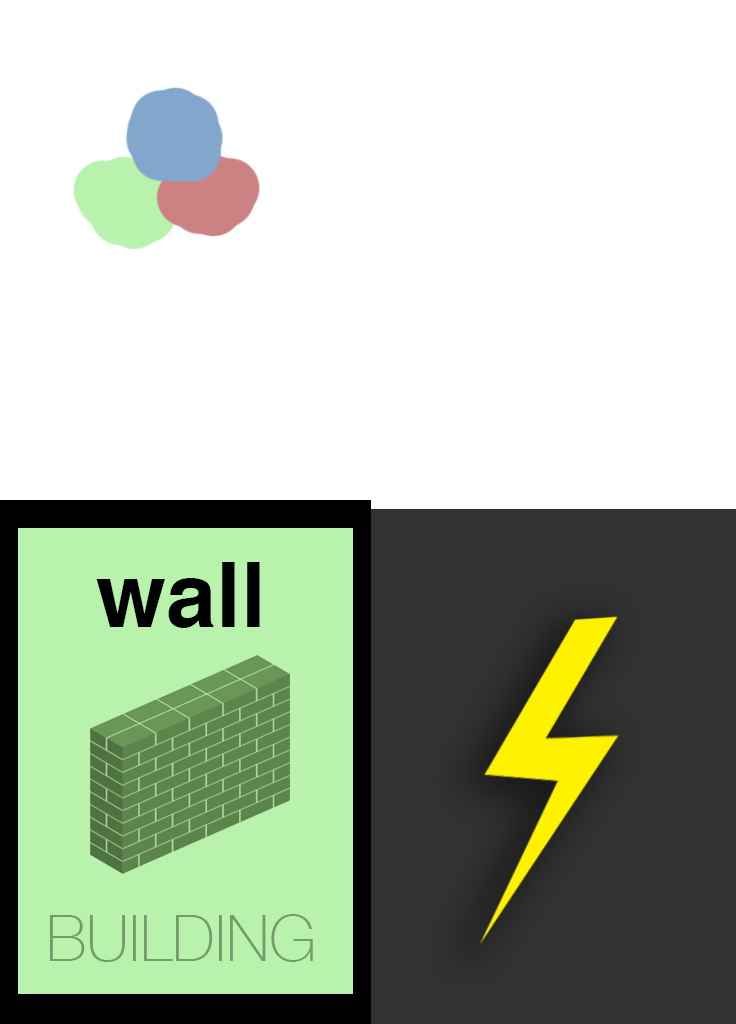
<style>
.page{position:relative;width:736px;height:1024px;background:#ffffff}
.page>*{position:absolute;margin:0}
.t1{font:90px "Helvetica-Bold";color:#000000}
.t2{font:64px "HelveticaNeue-Thin";color:#749a6d}
</style>
<div class="page">
<p class="t1" style="left:96px;top:562px;width:164px;height:66px">wall</p>
<p class="t2" style="left:50px;top:914px;width:263px;height:48px">BUILDING</p>
</div>
